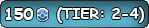
<style>
.page{position:relative;width:149px;height:28px}
.page>*{position:absolute;margin:0}
.t1{font:12px "ComicSansMS-Bold";color:#ffffff}
.t2{font:14.7px "ComicSansMS-Bold";color:#ffffff}
</style>
<div class="page">
<p class="t1" style="left:5px;top:8px;width:29px;height:12px">150</p>
<p class="t2" style="left:57px;top:7px;width:87px;height:16px">(TIER: 2-4)</p>
</div>
